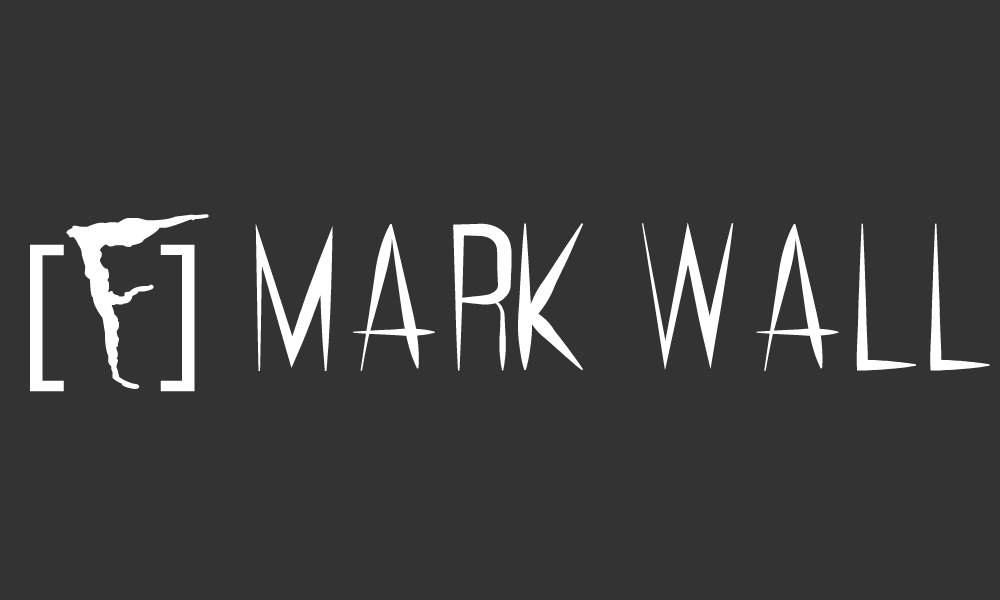
<style>
.page{position:relative;width:1000px;height:600px;background:#333333}
.page>*{position:absolute;margin:0}
.t1{font:183.3px "Feral-Regular";color:#ffffff}
.t2{font:183.3px "MyriadPro-Regular";color:#ffffff}
.t3{font:183.3px "FrankKnows";color:#ffffff}
</style>
<div class="page">
<p class="t1" style="left:30px;top:214px;width:960px;height:178px"><span class="t2">[</span><span class="t3">F</span><span class="t2">]</span> Mark Wall</p>
</div>
